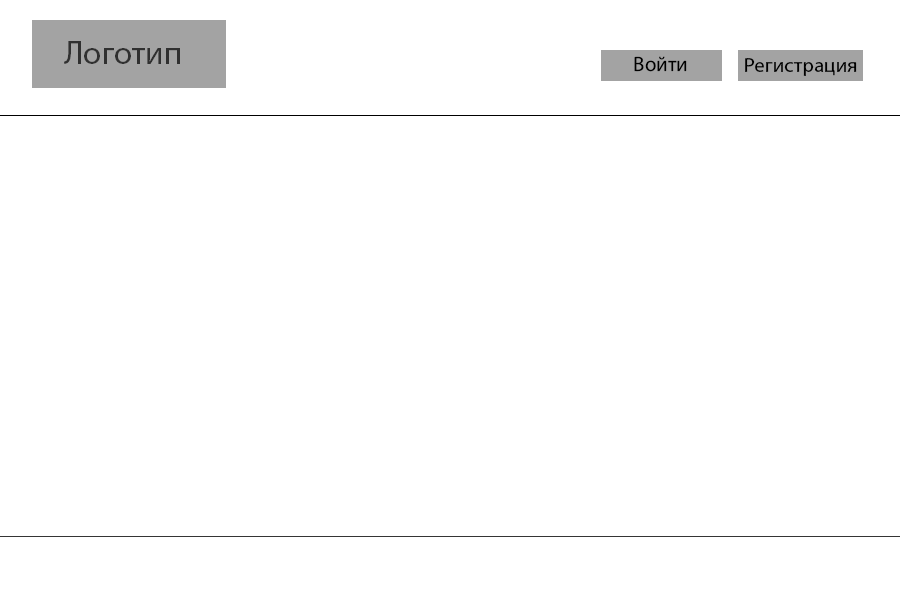
<style>
.page{position:relative;width:900px;height:600px;background:#ffffff}
.page>*{position:absolute;margin:0}
.t1{font:33.3px "MyriadPro-Regular";color:#303030}
.t2{font:20.8px "MyriadPro-Regular";color:#000000}
</style>
<div class="page">
<p class="t1" style="left:64px;top:41px;width:116px;height:23px">Логотип</p>
<p class="t2" style="left:634px;top:56px;width:53px;height:16px">Войти</p>
<p class="t2" style="left:745px;top:58px;width:112px;height:18px">Регистрация</p>
</div>
